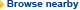
<style>
.page{position:relative;width:80px;height:10px;background:#ffffff}
.page>*{position:absolute;margin:0}
.t1{font:10px "Arial-BoldMT";color:#014184}
</style>
<div class="page">
<p class="t1" style="left:7px;top:0px;width:72px;height:9px">Browse nearby</p>
</div>
